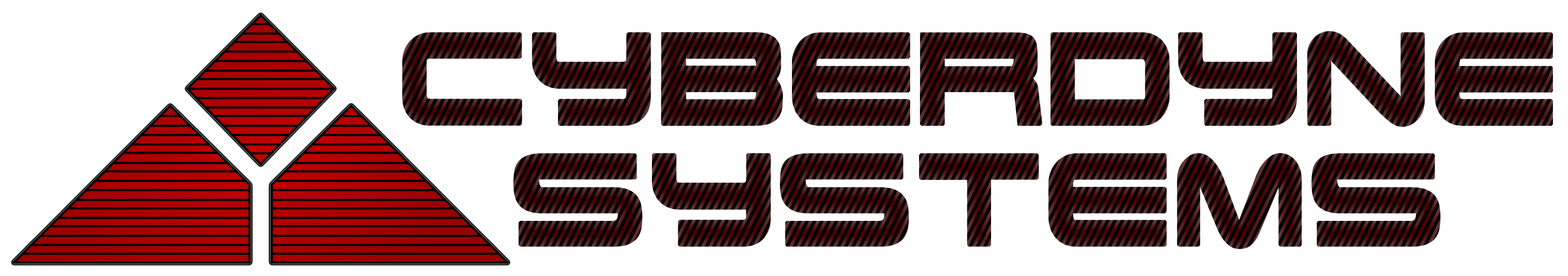
<style>
.page{position:relative;width:1568px;height:276px;background:#ffffff}
.page>*{position:absolute;margin:0}
.t1{font:174.3px/96.9px "TerminatorRealNFI";font-variant:small-caps;font-weight:bold;scale:0.91 1}
</style>
<div class="page">
<p class="t1" style="left:402px;top:31px;width:1151px;height:218px;text-align:center">cyberdyne<br>systems</p>
</div>
